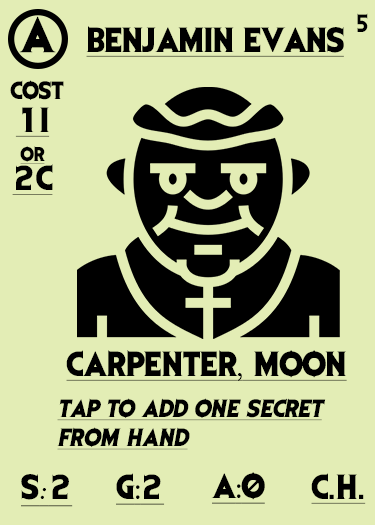
<style>
.page{position:relative;width:375px;height:525px;background:#e3edb5}
.page>*{position:absolute;margin:0}
.t1{font:41.7px "EvilDead";letter-spacing:-0.05em;color:#000000}
.t2{font:20.8px "EvilDead";color:#000000}
.t3{font:29.2px "EvilDead";letter-spacing:-0.025em;color:#000000;text-decoration:underline}
.t4{font:29.2px/29.2px "EvilDead";color:#000000;text-decoration:underline}
.t5{font:16.7px/29.2px "EvilDead";color:#000000;text-decoration:underline}
.t6{font:29.2px "EvilDead";color:#000000;text-decoration:underline}
.t7{font:29.2px "FelixTitlingMT";color:#000000;text-decoration:underline}
.t8{font:20.8px/29.2px "EvilDead";color:#000000;font-style:italic;text-decoration:underline}
.t9{font:29.2px "MyriadPro-Regular";color:#000000;text-decoration:underline}
.t10{font:29.2px "Fadli-Script";color:#000000;text-decoration:underline}
</style>
<div class="page">
<p class="t1" style="left:19px;top:16px;width:37px;height:37px">A</p>
<p class="t2" style="left:357px;top:13px;width:11px;height:19px">5</p>
<p class="t3" style="left:86px;top:26px;width:258px;height:31px">BENJAMIN EVANS</p>
<p class="t2" style="left:10px;top:80px;width:54px;height:20px">COST</p>
<p class="t4" style="left:12px;top:107px;width:41px;height:88px;text-align:center">1I<br><span class="t5">or<br></span>2C</p>
<p class="t6" style="left:66px;top:350px;width:281px;height:31px">CARPENTER<span class="t7">,</span> MOON</p>
<p class="t8" style="left:57px;top:398px;width:269px;height:52px">Tap to add one secret<br>FROM HAND</p>
<p class="t6" style="left:116px;top:473px;width:49px;height:32px">G<span class="t9">:</span>2</p>
<p class="t6" style="left:211px;top:472px;width:54px;height:32px">A<span class="t9">:</span>0</p>
<p class="t6" style="left:311px;top:473px;width:55px;height:31px">C.H.</p>
<p class="t6" style="left:21px;top:474px;width:52px;height:33px">S<span class="t10">:</span>2</p>
</div>
